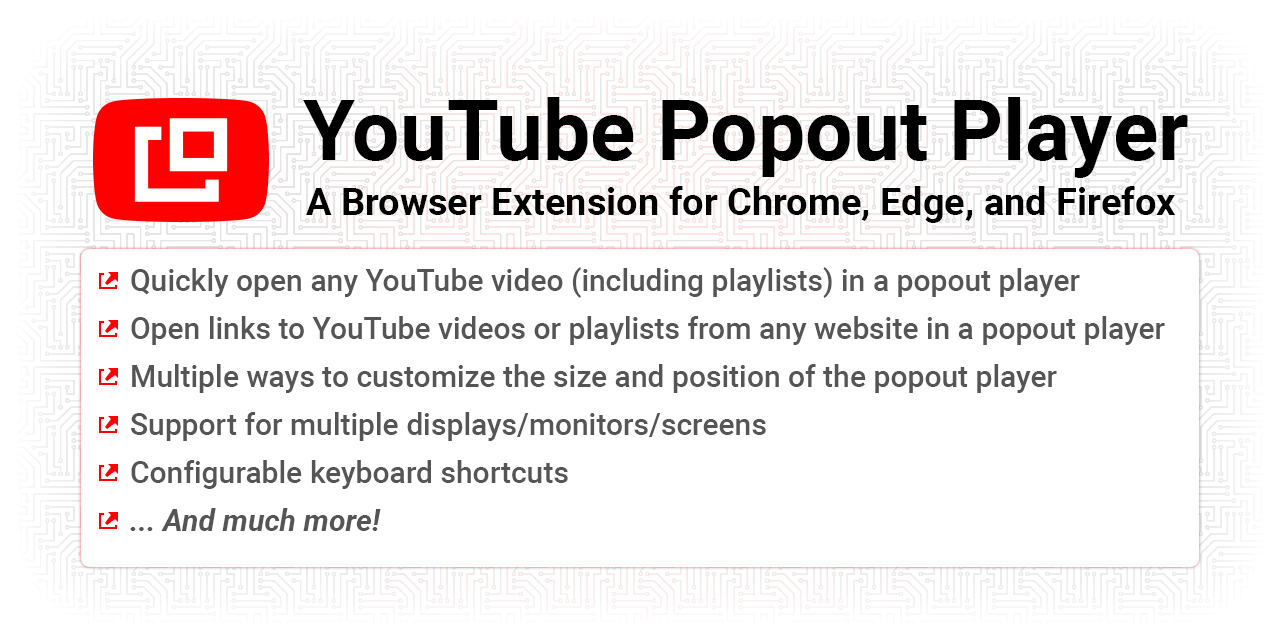
<style>
.page{position:relative;width:1280px;height:640px;background:#ffffff}
.page>*{position:absolute;margin:0}
.t1{font:84px "Roboto-Bold";color:#000000}
.t2{font:38px "Roboto-Bold";color:#000000}
.t3{font:30px/48px "Roboto-Medium";color:#555555}
.t4{font:30px/48px "Roboto-BoldItalic";color:#555555}
</style>
<div class="page">
<p class="t1" style="left:303px;top:97px;width:885px;height:81px">YouTube Popout Player</p>
<p class="t2" style="left:306px;top:186px;width:870px;height:37px">A Browser Extension for Chrome, Edge, and Firefox</p>
<p class="t3" style="left:130px;top:267px;width:1035px;height:264px">Quickly open any YouTube video (including playlists) in a popout player<br>Open links to YouTube videos or playlists from any website in a popout player<br>Multiple ways to customize the size and position of the popout player<br>Support for multiple displays/monitors/screens<br>Configurable keyboard shortcuts<br><span class="t4">... And much more!</span></p>
</div>
